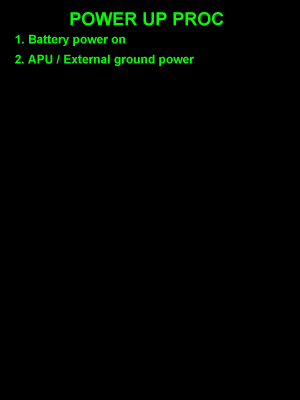
<style>
.page{position:relative;width:300px;height:400px;background:#000000}
.page>*{position:absolute;margin:0}
.t1{font:18px "Arial-BoldMT";color:#00ff00}
.t2{font:12px "Arial-BoldMT";color:#00ff00}
</style>
<div class="page">
<p class="t1" style="left:70px;top:12px;width:154px;height:14px">POWER UP PROC</p>
<p class="t2" style="left:15px;top:34px;width:110px;height:12px">1. Battery power on</p>
<p class="t2" style="left:15px;top:54px;width:180px;height:12px">2. APU / External ground power</p>
</div>
